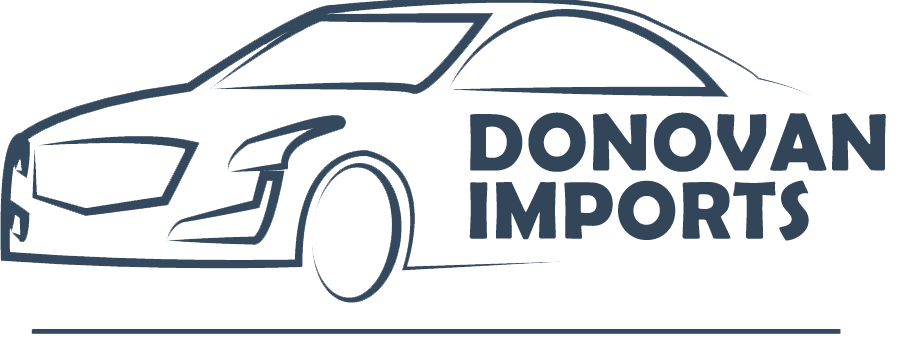
<style>
.page{position:relative;width:900px;height:350px;background:#ffffff}
.page>*{position:absolute;margin:0}
.t1{font:81.8px/68.2px "BerlinSansFBDemi-Bold";letter-spacing:0.02em;color:#334559}
</style>
<div class="page">
<p class="t1" style="left:469px;top:112px;width:417px;height:129px">DONOVAN <br>IMPORTS</p>
</div>
